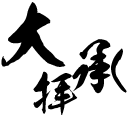
<style>
.page{position:relative;width:130px;height:115px;background:#ffffff}
.page>*{position:absolute;margin:0}
.t1{font:72px "RaijinTtf";color:#000000}
.t2{font:60px "RaijinTtf";color:#000000}
.t3{font:48px "RaijinTtf";color:#000000}
</style>
<div class="page">
<p class="t1" style="left:1px;top:2px;width:65px;height:65px">大</p>
<p class="t2" style="left:72px;top:39px;width:55px;height:55px">承</p>
<p class="t3" style="left:33px;top:71px;width:45px;height:45px">拝</p>
</div>
